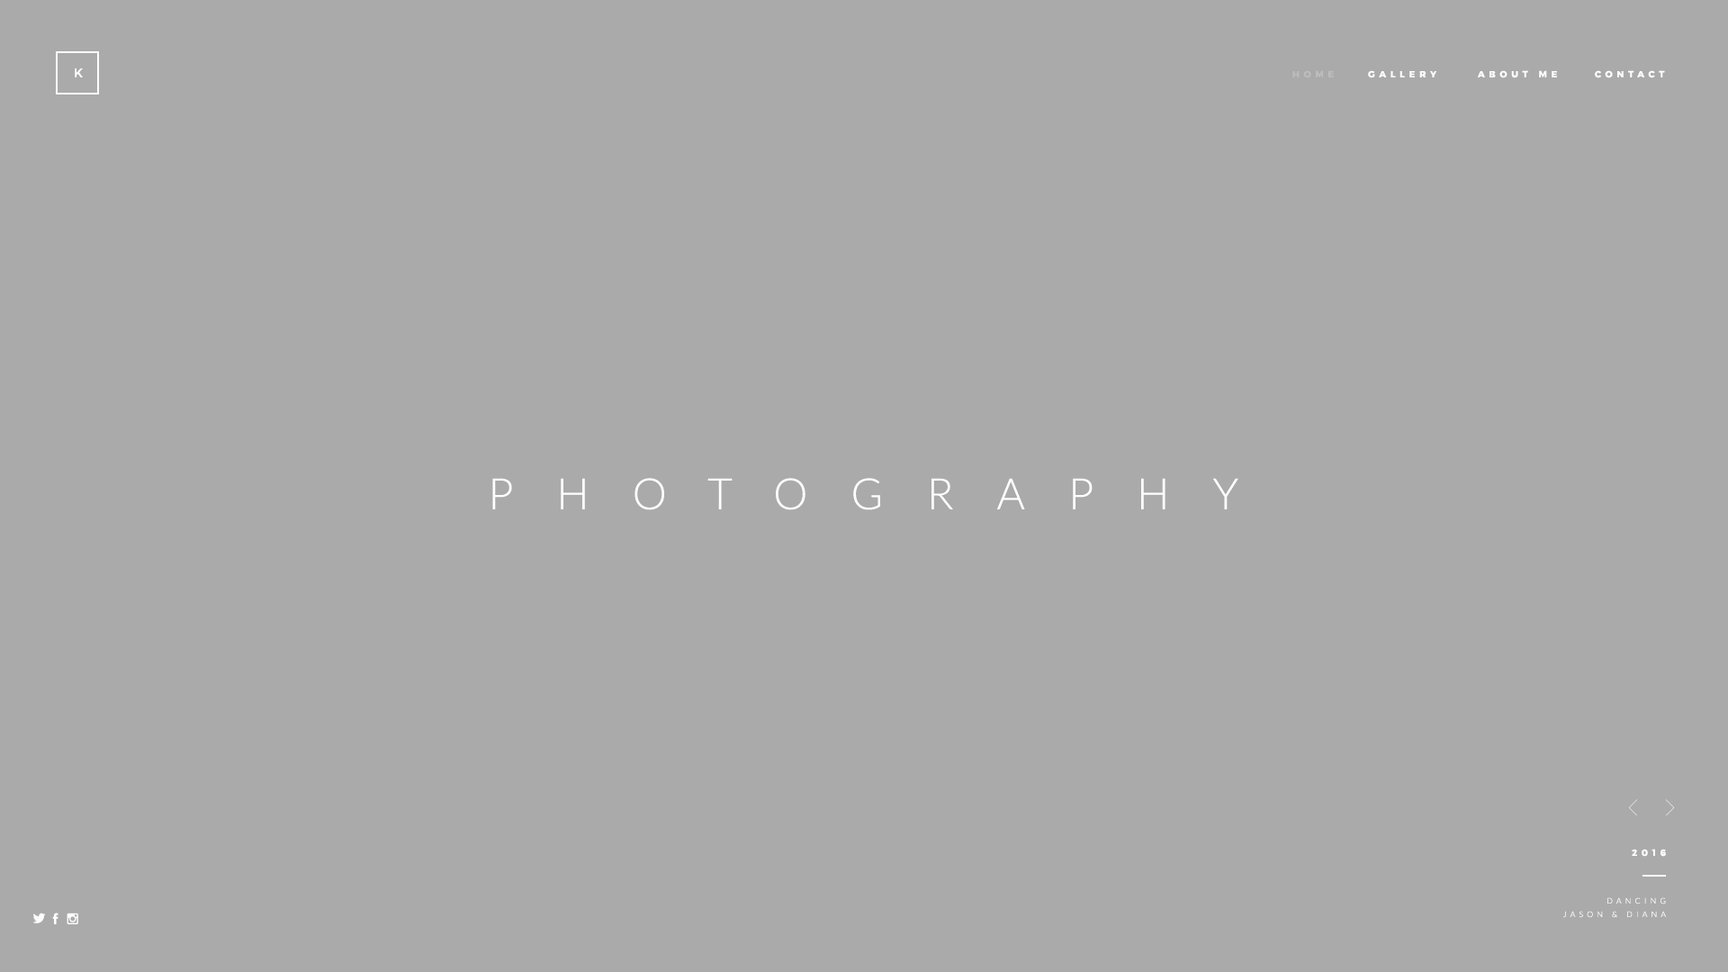
<style>
.page{position:relative;width:1728px;height:972px;background:#aaaaaa}
.page>*{position:absolute;margin:0}
.t1{font:12.6px "Montserrat-Regular";color:#ffffff;text-transform:uppercase}
.t2{font:9px "Montserrat-Bold";letter-spacing:0.48em;color:#bdbdbd;text-transform:uppercase}
.t3{font:9px "Montserrat-Bold";letter-spacing:0.48em;color:#ffffff;text-transform:uppercase}
.t4{font:43.2px "Lato-Light";letter-spacing:1em;color:#ffffff;text-transform:uppercase}
.t5{font:7.9px/13.5px "Lato-Light";letter-spacing:0.48em;color:#ffffff;text-transform:uppercase}
</style>
<div class="page">
<p class="t1" style="left:75px;top:68px;width:8px;height:9px">K</p>
<p class="t2" style="left:1292px;top:70px;width:42px;height:8px">home</p>
<p class="t3" style="left:1368px;top:70px;width:69px;height:8px">gallery</p>
<p class="t3" style="left:1477px;top:70px;width:80px;height:8px">about me</p>
<p class="t3" style="left:1595px;top:70px;width:70px;height:8px">contact</p>
<p class="t4" style="left:492px;top:478px;width:746px;height:32px">photography</p>
<p class="t3" style="left:1632px;top:849px;width:34px;height:8px">2016</p>
<p class="t5" style="left:1563px;top:897px;width:103px;height:21px;text-align:right">dancing<br>jason &amp; diana</p>
</div>
